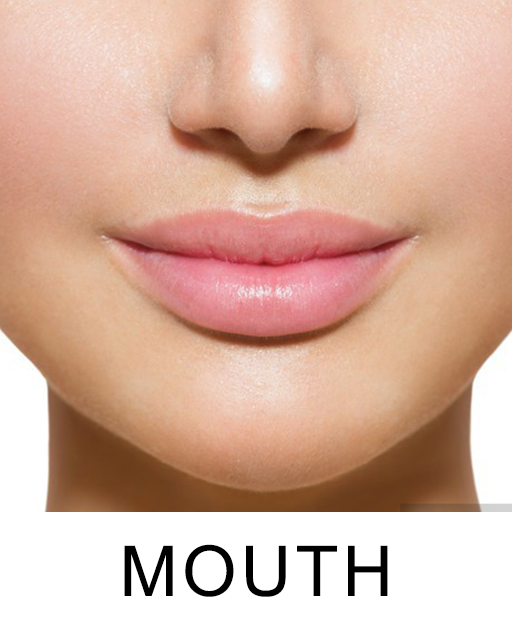
<style>
.page{position:relative;width:512px;height:630px}
.page>*{position:absolute;margin:0}
.t1{font:70px "ArialMT";letter-spacing:0.06em;color:#000000}
</style>
<div class="page">
<p class="t1" style="left:124px;top:544px;width:264px;height:53px">MOUTH</p>
</div>
